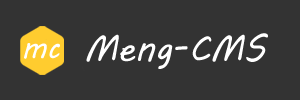
<style>
.page{position:relative;width:300px;height:100px;background:#333333}
.page>*{position:absolute;margin:0}
.t1{font:36px "MVBoli";color:#ffffff}
.t2{font:30px "MVBoli";color:#ffffff}
</style>
<div class="page">
<p class="t1" style="left:86px;top:33px;width:182px;height:36px">Meng-CMS</p>
<p class="t2" style="left:24px;top:43px;width:36px;height:16px">mc</p>
</div>
